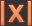
<style>
.page{position:relative;width:32px;height:26px;background:#333333}
.page>*{position:absolute;margin:0}
.t1{font:24px "Ubuntu-Bold";color:#f09560}
</style>
<div class="page">
<p class="t1" style="left:8px;top:5px;width:16px;height:17px">X</p>
</div>
